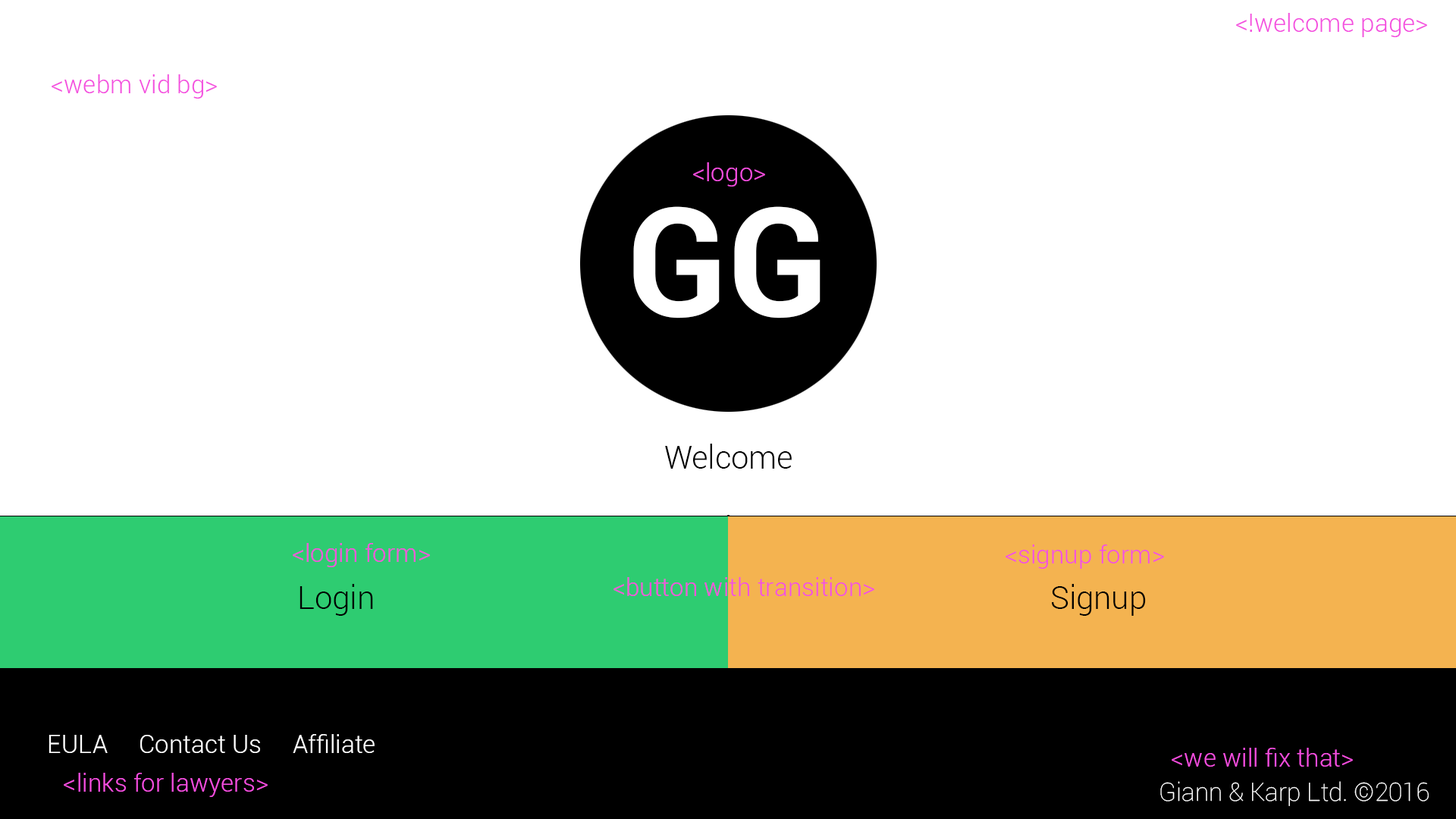
<style>
.page{position:relative;width:1456px;height:819px;background:#ffffff}
.page>*{position:absolute;margin:0}
.t1{font:25.3px "Roboto-Light";color:#f44edf}
.t2{font:151.7px "Roboto-Bold";color:#ffffff}
.t3{font:31.6px "Roboto-Light";color:#000000}
.t4{font:25.3px "Roboto-Light";color:#ffffff}
.t5{font:25.3px "Roboto-Thin";color:#ffffff}
</style>
<div class="page">
<p class="t1" style="left:1236px;top:13px;width:191px;height:24px">&lt;!welcome page&gt;</p>
<p class="t1" style="left:52px;top:74px;width:165px;height:25px">&lt;webm vid bg&gt;</p>
<p class="t1" style="left:693px;top:162px;width:72px;height:25px">&lt;logo&gt;</p>
<p class="t2" style="left:633px;top:206px;width:188px;height:112px">GG</p>
<p class="t3" style="left:665px;top:444px;width:127px;height:25px">Welcome</p>
<p class="t1" style="left:293px;top:543px;width:137px;height:24px">&lt;login form&gt;</p>
<p class="t1" style="left:1006px;top:544px;width:158px;height:25px">&lt;signup form&gt;</p>
<p class="t1" style="left:613px;top:577px;width:261px;height:19px">&lt;button with transition&gt;</p>
<p class="t3" style="left:300px;top:584px;width:73px;height:32px">Login</p>
<p class="t3" style="left:1052px;top:584px;width:94px;height:32px">Signup</p>
<p class="t4" style="left:49px;top:734px;width:326px;height:19px">EULA     Contact Us     Affiliate</p>
<p class="t1" style="left:1172px;top:748px;width:181px;height:19px">&lt;we will fix that&gt;</p>
<p class="t1" style="left:64px;top:773px;width:204px;height:24px">&lt;links for lawyers&gt;</p>
<p class="t5" style="left:1160px;top:781px;width:269px;height:25px">Giann &amp; Karp Ltd. ©2016</p>
</div>
